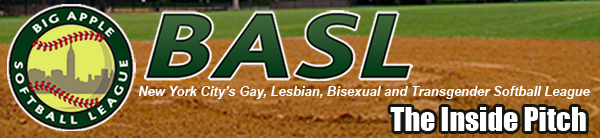
<style>
.page{position:relative;width:600px;height:138px}
.page>*{position:absolute;margin:0}
.t1{font:13px "Arial-BoldItalicMT";color:#ffffff}
.t2{font:30px "Impact";color:#ffffff}
</style>
<div class="page">
<p class="t1" style="left:138px;top:86px;width:452px;height:13px">New York City’s Gay, Lesbian, Bisexual and Transgender Softball League</p>
<p class="t2" style="left:390px;top:107px;width:196px;height:24px">The Inside Pitch</p>
</div>
